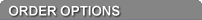
<style>
.page{position:relative;width:202px;height:20px;background:#858585}
.page>*{position:absolute;margin:0}
.t1{font:13.3px "Arial-BoldMT";color:#ffffff}
</style>
<div class="page">
<p class="t1" style="left:9px;top:5px;width:111px;height:11px">ORDER OPTIONS</p>
</div>
